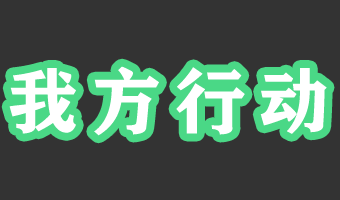
<style>
.page{position:relative;width:340px;height:200px;background:#333333}
.page>*{position:absolute;margin:0}
.t1{font:72px "FZCHSJW--GB1-0";letter-spacing:0.16em;color:#ffffff}
</style>
<div class="page">
<p class="t1" style="left:9px;top:66px;width:318px;height:70px">我方行动</p>
</div>
